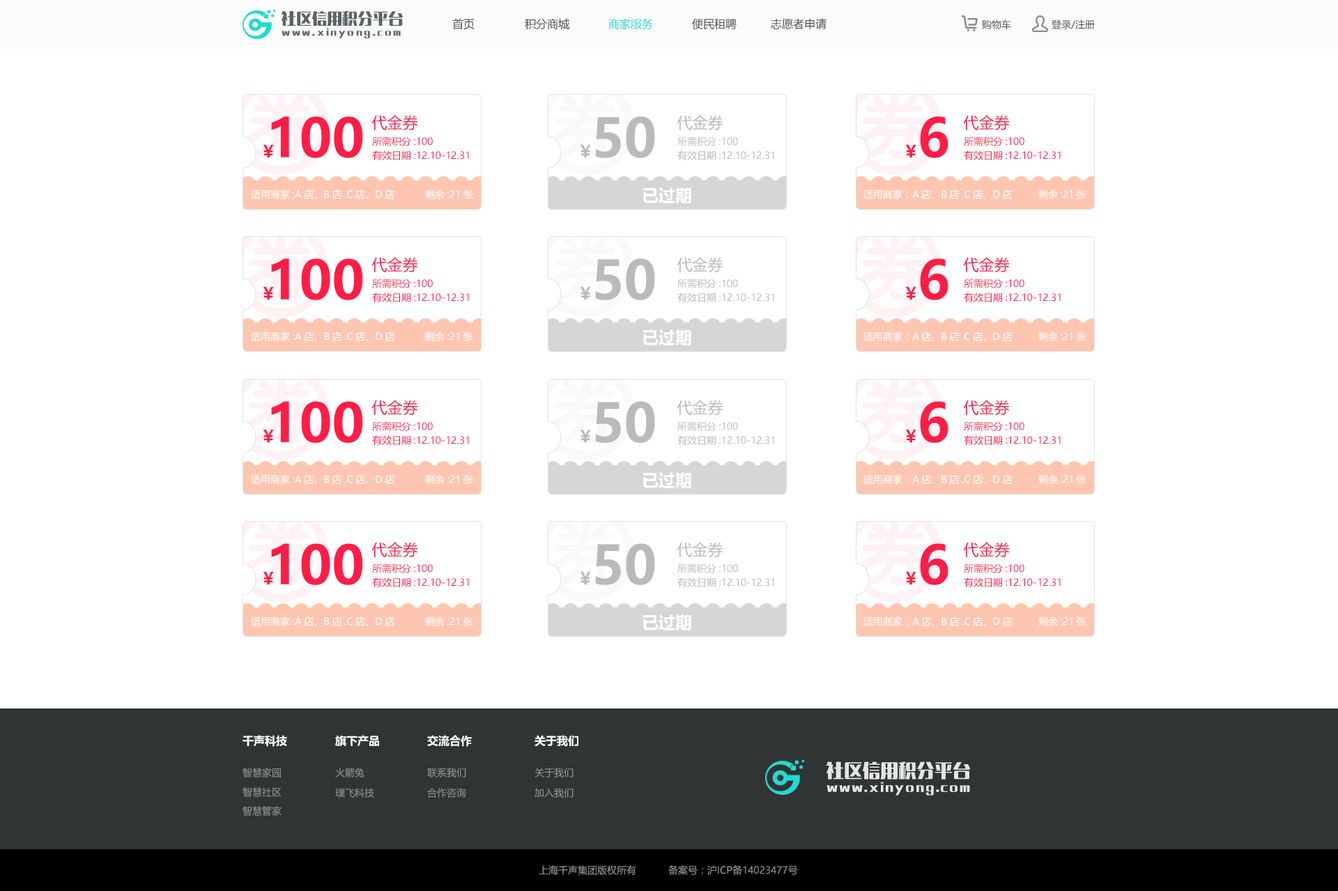
<style>
.page{position:relative;width:1338px;height:891px;background:#ffffff}
.page>*{position:absolute;margin:0}
.t1{font:15.3px "MFLangQian_Noncommercial-Bold";color:#5c6365}
.t2{font:8.4px "MFLangQian_Noncommercial-Bold";letter-spacing:0.22em;color:#5c6365}
.t3{font:11.1px "MicrosoftYaHei";color:#4a4a4a}
.t4{font:11.1px "MicrosoftYaHei";color:#21dccd}
.t5{font:9.8px "MicrosoftYaHei";color:#4a4a4a}
.t6{font:53px "MicrosoftYaHei-Bold";color:#ff1d47}
.t7{font:15.3px "MicrosoftYaHei";color:#ff1d47}
.t8{font:53px "MicrosoftYaHei-Bold";color:#bababa}
.t9{font:15.3px "MicrosoftYaHei";color:#bababa}
.t10{font:9.8px "MicrosoftYaHei";color:#ff1d47}
.t11{font:9.8px "MicrosoftYaHei";color:#bababa}
.t12{font:16.7px "MicrosoftYaHei-Bold";color:#ff1d47}
.t13{font:16.7px "MicrosoftYaHei-Bold";color:#bababa}
.t14{font:9.8px "MicrosoftYaHei";color:#ffffff}
.t15{font:16.7px "MicrosoftYaHei-Bold";color:#ffffff}
.t16{font:11.1px "MicrosoftYaHei-Bold";color:#ffffff}
.t17{font:18.1px "MFLangQian_Noncommercial-Bold";color:#e5e5e5}
.t18{font:9.8px "MicrosoftYaHei";color:#929292}
.t19{font:11.1px "MFLangQian_Noncommercial-Bold";letter-spacing:0.12em;color:#e5e5e5}
</style>
<div class="page">
<p class="t1" style="left:281px;top:11px;width:122px;height:15px">社区信用积分平台</p>
<p class="t2" style="left:282px;top:28px;width:119px;height:10px">www.xinyong.com</p>
<p class="t3" style="left:452px;top:18px;width:23px;height:12px">首页</p>
<p class="t3" style="left:525px;top:18px;width:44px;height:12px">积分商城</p>
<p class="t4" style="left:608px;top:18px;width:45px;height:12px">商家服务</p>
<p class="t3" style="left:692px;top:18px;width:45px;height:12px">便民租聘</p>
<p class="t3" style="left:771px;top:18px;width:55px;height:12px">志愿者申请</p>
<p class="t5" style="left:982px;top:20px;width:29px;height:9px">购物车</p>
<p class="t5" style="left:1052px;top:20px;width:43px;height:9px">登录/注册</p>
<p class="t6" style="left:271px;top:116px;width:92px;height:42px">100</p>
<p class="t7" style="left:371px;top:115px;width:47px;height:15px">代金券</p>
<p class="t8" style="left:595px;top:116px;width:60px;height:42px">50</p>
<p class="t9" style="left:677px;top:115px;width:46px;height:15px">代金券</p>
<p class="t6" style="left:920px;top:116px;width:28px;height:42px">6</p>
<p class="t7" style="left:963px;top:115px;width:47px;height:15px">代金券</p>
<p class="t10" style="left:372px;top:137px;width:61px;height:9px">所需积分:100</p>
<p class="t11" style="left:677px;top:137px;width:61px;height:9px">所需积分:100</p>
<p class="t10" style="left:964px;top:137px;width:60px;height:9px">所需积分:100</p>
<p class="t12" style="left:263px;top:144px;width:11px;height:13px">￥</p>
<p class="t13" style="left:580px;top:144px;width:11px;height:13px">￥</p>
<p class="t12" style="left:905px;top:144px;width:11px;height:13px">￥</p>
<p class="t10" style="left:372px;top:151px;width:97px;height:9px">有效日期:12.10-12.31</p>
<p class="t11" style="left:677px;top:151px;width:97px;height:9px">有效日期:12.10-12.31</p>
<p class="t10" style="left:964px;top:151px;width:97px;height:9px">有效日期:12.10-12.31</p>
<p class="t14" style="left:251px;top:190px;width:144px;height:9px">适用商家:A店、B店.C店、D店</p>
<p class="t14" style="left:425px;top:190px;width:48px;height:9px">剩余:21张</p>
<p class="t15" style="left:643px;top:187px;width:48px;height:17px">已过期</p>
<p class="t14" style="left:863px;top:190px;width:150px;height:9px">适用商家：A店、B店.C店、D店</p>
<p class="t14" style="left:1038px;top:190px;width:48px;height:9px">剩余:21张</p>
<p class="t7" style="left:371px;top:257px;width:47px;height:15px">代金券</p>
<p class="t9" style="left:677px;top:257px;width:46px;height:15px">代金券</p>
<p class="t7" style="left:963px;top:257px;width:47px;height:15px">代金券</p>
<p class="t6" style="left:271px;top:259px;width:92px;height:41px">100</p>
<p class="t8" style="left:595px;top:259px;width:60px;height:41px">50</p>
<p class="t6" style="left:920px;top:259px;width:28px;height:41px">6</p>
<p class="t10" style="left:372px;top:279px;width:61px;height:9px">所需积分:100</p>
<p class="t11" style="left:677px;top:279px;width:61px;height:9px">所需积分:100</p>
<p class="t10" style="left:964px;top:279px;width:60px;height:9px">所需积分:100</p>
<p class="t12" style="left:263px;top:286px;width:11px;height:14px">￥</p>
<p class="t10" style="left:372px;top:293px;width:97px;height:9px">有效日期:12.10-12.31</p>
<p class="t13" style="left:580px;top:286px;width:11px;height:14px">￥</p>
<p class="t11" style="left:677px;top:293px;width:97px;height:9px">有效日期:12.10-12.31</p>
<p class="t12" style="left:905px;top:286px;width:11px;height:14px">￥</p>
<p class="t10" style="left:964px;top:293px;width:97px;height:9px">有效日期:12.10-12.31</p>
<p class="t15" style="left:643px;top:330px;width:48px;height:16px">已过期</p>
<p class="t14" style="left:251px;top:332px;width:144px;height:9px">适用商家:A店、B店.C店、D店</p>
<p class="t14" style="left:425px;top:332px;width:48px;height:9px">剩余:21张</p>
<p class="t14" style="left:863px;top:332px;width:150px;height:9px">适用商家：A店、B店.C店、D店</p>
<p class="t14" style="left:1038px;top:332px;width:48px;height:9px">剩余:21张</p>
<p class="t6" style="left:271px;top:401px;width:92px;height:42px">100</p>
<p class="t7" style="left:371px;top:400px;width:47px;height:15px">代金券</p>
<p class="t8" style="left:595px;top:401px;width:60px;height:42px">50</p>
<p class="t9" style="left:677px;top:400px;width:46px;height:15px">代金券</p>
<p class="t6" style="left:920px;top:401px;width:28px;height:42px">6</p>
<p class="t7" style="left:963px;top:400px;width:47px;height:15px">代金券</p>
<p class="t10" style="left:372px;top:422px;width:61px;height:9px">所需积分:100</p>
<p class="t11" style="left:677px;top:422px;width:61px;height:9px">所需积分:100</p>
<p class="t10" style="left:964px;top:422px;width:60px;height:9px">所需积分:100</p>
<p class="t12" style="left:263px;top:429px;width:11px;height:13px">￥</p>
<p class="t10" style="left:372px;top:436px;width:97px;height:9px">有效日期:12.10-12.31</p>
<p class="t13" style="left:580px;top:429px;width:11px;height:13px">￥</p>
<p class="t11" style="left:677px;top:436px;width:97px;height:9px">有效日期:12.10-12.31</p>
<p class="t12" style="left:905px;top:429px;width:11px;height:13px">￥</p>
<p class="t10" style="left:964px;top:436px;width:97px;height:9px">有效日期:12.10-12.31</p>
<p class="t15" style="left:643px;top:472px;width:48px;height:17px">已过期</p>
<p class="t14" style="left:251px;top:475px;width:144px;height:9px">适用商家:A店、B店.C店、D店</p>
<p class="t14" style="left:425px;top:475px;width:48px;height:9px">剩余:21张</p>
<p class="t14" style="left:863px;top:475px;width:150px;height:9px">适用商家：A店、B店.C店、D店</p>
<p class="t14" style="left:1038px;top:475px;width:48px;height:9px">剩余:21张</p>
<p class="t6" style="left:271px;top:544px;width:92px;height:41px">100</p>
<p class="t7" style="left:371px;top:542px;width:47px;height:15px">代金券</p>
<p class="t8" style="left:595px;top:544px;width:60px;height:41px">50</p>
<p class="t9" style="left:677px;top:542px;width:46px;height:15px">代金券</p>
<p class="t6" style="left:920px;top:544px;width:28px;height:41px">6</p>
<p class="t7" style="left:963px;top:542px;width:47px;height:15px">代金券</p>
<p class="t10" style="left:372px;top:564px;width:61px;height:9px">所需积分:100</p>
<p class="t11" style="left:677px;top:564px;width:61px;height:9px">所需积分:100</p>
<p class="t10" style="left:964px;top:564px;width:60px;height:9px">所需积分:100</p>
<p class="t12" style="left:263px;top:571px;width:11px;height:14px">￥</p>
<p class="t10" style="left:372px;top:578px;width:97px;height:9px">有效日期:12.10-12.31</p>
<p class="t13" style="left:580px;top:571px;width:11px;height:14px">￥</p>
<p class="t11" style="left:677px;top:578px;width:97px;height:9px">有效日期:12.10-12.31</p>
<p class="t12" style="left:905px;top:571px;width:11px;height:14px">￥</p>
<p class="t10" style="left:964px;top:578px;width:97px;height:9px">有效日期:12.10-12.31</p>
<p class="t14" style="left:251px;top:617px;width:144px;height:9px">适用商家:A店、B店.C店、D店</p>
<p class="t14" style="left:425px;top:617px;width:48px;height:9px">剩余:21张</p>
<p class="t15" style="left:643px;top:615px;width:48px;height:16px">已过期</p>
<p class="t14" style="left:863px;top:617px;width:150px;height:9px">适用商家：A店、B店.C店、D店</p>
<p class="t14" style="left:1038px;top:617px;width:48px;height:9px">剩余:21张</p>
<p class="t16" style="left:242px;top:735px;width:45px;height:12px">千声科技</p>
<p class="t16" style="left:335px;top:735px;width:44px;height:12px">旗下产品</p>
<p class="t16" style="left:427px;top:735px;width:45px;height:12px">交流合作</p>
<p class="t16" style="left:534px;top:735px;width:44px;height:12px">关于我们</p>
<p class="t17" style="left:826px;top:762px;width:144px;height:18px">社区信用积分平台</p>
<p class="t18" style="left:242px;top:768px;width:39px;height:10px">智慧家园</p>
<p class="t18" style="left:335px;top:768px;width:29px;height:10px">火箭兔</p>
<p class="t18" style="left:427px;top:768px;width:39px;height:10px">联系我们</p>
<p class="t18" style="left:534px;top:768px;width:39px;height:10px">关于我们</p>
<p class="t19" style="left:826px;top:782px;width:144px;height:14px">www.xinyong.com</p>
<p class="t18" style="left:242px;top:787px;width:40px;height:10px">智慧社区</p>
<p class="t18" style="left:335px;top:788px;width:39px;height:10px">璞飞科技</p>
<p class="t18" style="left:427px;top:788px;width:39px;height:10px">合作咨询</p>
<p class="t18" style="left:534px;top:788px;width:39px;height:10px">加入我们</p>
<p class="t18" style="left:242px;top:806px;width:40px;height:10px">智慧管家</p>
<p class="t18" style="left:539px;top:865px;width:97px;height:10px">上海千声集团版权所有</p>
<p class="t18" style="left:668px;top:865px;width:130px;height:10px">备案号：沪ICP备14023477号</p>
</div>
